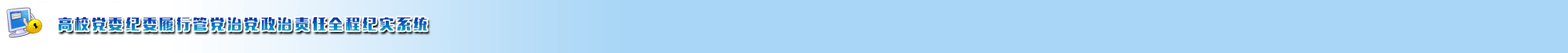
<style>
.page{position:relative;width:1568px;height:53px;background:#a9d6f6}
.page>*{position:absolute;margin:0}
.t1{font:14.1px "MFLiHei_Noncommercial-Regular";letter-spacing:0.2em}
</style>
<div class="page">
<p class="t1" style="left:58px;top:17px;width:369px;height:14px">高校党委纪委履行管党治党政治责任全程纪实系统</p>
</div>
